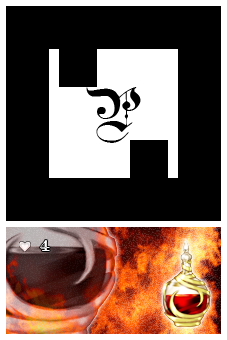
<style>
.page{position:relative;width:227px;height:340px;background:#000000}
.page>*{position:absolute;margin:0}
.t1{font:56.5px "TeutonicNo1-DemiBold";color:#000000}
.t2{font:16px "TeutonicNo4-DemiBold";color:#fefefe}
</style>
<div class="page">
<p class="t1" style="left:86px;top:87px;width:55px;height:56px">P</p>
<p class="t2" style="left:40px;top:240px;width:10px;height:11px">4</p>
</div>
